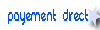
<style>
.page{position:relative;width:100px;height:30px;background:#ffffff}
.page>*{position:absolute;margin:0}
.t1{font:18.7px "REZ";color:#0450fa;scale:0.67 1}
</style>
<div class="page">
<p class="t1" style="left:8px;top:9px;width:80px;height:16px">payement direct</p>
</div>
